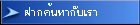
<style>
.page{position:relative;width:140px;height:25px}
.page>*{position:absolute;margin:0}
.t1{font:15.3px "EucrosiaDSE";color:#ffffff;scale:1.12 1}
</style>
<div class="page">
<p class="t1" style="left:25px;top:3px;width:72px;height:13px">½Ò¡¤é¹ËÒ¡ÑºàÃÒ</p>
</div>
